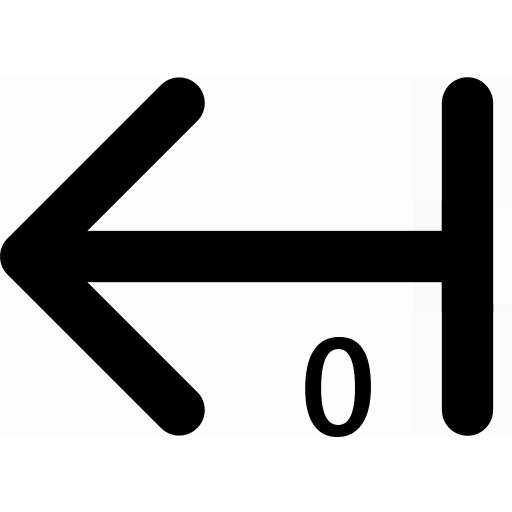
<style>
.page{position:relative;width:512px;height:512px;background:#fdfdfd}
.page>*{position:absolute;margin:0}
.t1{font:137.4px "SegoeUI-Semibold";color:#000000}
</style>
<div class="page">
<p class="t1" style="left:305px;top:337px;width:66px;height:100px">0</p>
</div>
